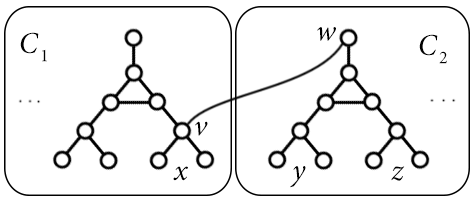
<style>
.page{position:relative;width:472px;height:202px;background:#ffffff}
.page>*{position:absolute;margin:0}
.t1{font:30px "MinionPro-It";color:#000000}
.t2{font:18px "MinionPro-Regular";color:#000000}
</style>
<div class="page">
<p class="t1" style="left:317px;top:27px;width:19px;height:14px">w</p>
<p class="t1" style="left:20px;top:32px;width:19px;height:22px">C</p>
<p class="t1" style="left:419px;top:34px;width:19px;height:22px">C</p>
<p class="t2" style="left:42px;top:49px;width:5px;height:13px">1</p>
<p class="t2" style="left:439px;top:51px;width:8px;height:13px">2</p>
<p class="t1" style="left:195px;top:121px;width:13px;height:15px">v</p>
<p class="t1" style="left:173px;top:166px;width:15px;height:15px">x</p>
<p class="t1" style="left:290px;top:166px;width:16px;height:22px">y</p>
<p class="t1" style="left:391px;top:166px;width:14px;height:15px">z</p>
</div>
